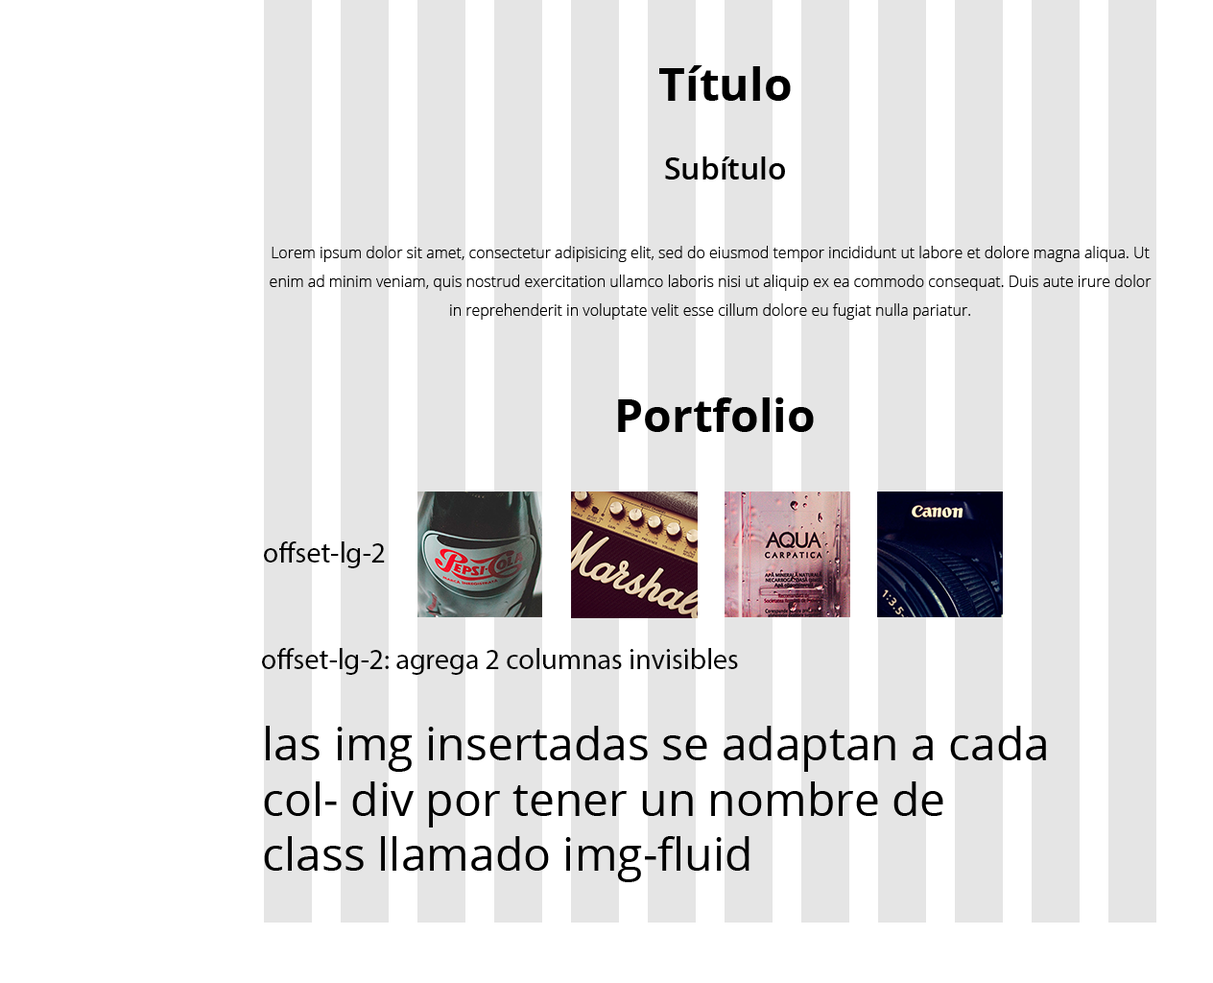
<style>
.page{position:relative;width:1213px;height:983px;background:#ffffff}
.page>*{position:absolute;margin:0}
.t1{font:46.1px "OpenSans-Bold";color:#000000}
.t2{font:30.7px "OpenSans-SemiBold";color:#000000}
.t3{font:15.4px/28.8px "OpenSans-Light";color:#000000}
.t4{font:28.8px "MyriadPro-Regular";color:#000000}
.t5{font:46.1px "OpenSans-Regular";color:#000000}
</style>
<div class="page">
<p class="t1" style="left:659px;top:65px;width:132px;height:36px">Título</p>
<p class="t2" style="left:665px;top:156px;width:120px;height:23px">Subítulo</p>
<p class="t3" style="left:270px;top:246px;width:882px;height:74px;text-align:center">Lorem ipsum dolor sit amet, consectetur adipisicing elit, sed do eiusmod tempor incididunt ut labore et dolore magna aliqua. Ut enim ad minim veniam, quis nostrud exercitation ullamco laboris nisi ut aliquip ex ea commodo consequat. Duis aute irure dolor in reprehenderit in voluptate velit esse cillum dolore eu fugiat nulla pariatur.</p>
<p class="t1" style="left:618px;top:397px;width:196px;height:35px">Portfolio</p>
<p class="t4" style="left:264px;top:541px;width:121px;height:27px">offset-lg-2</p>
<p class="t4" style="left:262px;top:648px;width:476px;height:27px">offset-lg-2: agrega 2 columnas invisibles</p>
<p class="t5" style="left:264px;top:726px;width:782px;height:156px">las img insertadas se adaptan a cada<br>col- div por tener un nombre de <br>class llamado img-fluid</p>
</div>
